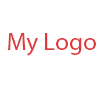
<style>
.page{position:relative;width:100px;height:100px;background:#ffffff}
.page>*{position:absolute;margin:0}
.t1{font:25px "MyriadPro-Regular";color:#dd3939}
</style>
<div class="page">
<p class="t1" style="left:8px;top:33px;width:88px;height:23px">My Logo</p>
</div>
